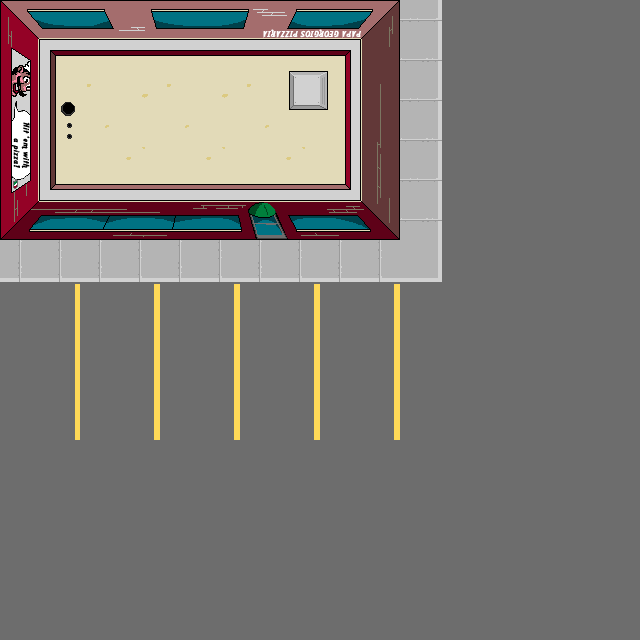
<style>
.page{position:relative;width:640px;height:640px;background:#6d6d6d}
.page>*{position:absolute;margin:0}
.t1{font:8px "AardvarkCafe";letter-spacing:0.1em;color:#ffffff}
.t2{font:8px "AardvarkCafe";letter-spacing:0.1em;color:#000000}
</style>
<div class="page">
<p class="t1" style="left:263px;top:29px;width:98px;height:9px;rotate:180deg">PAPA GEORGIOS PIZZARIA</p>
<p class="t2" style="left:12px;top:122px;width:18px;height:46px;text-align:right;rotate:90deg">Hit ‘em with<br>a pizza!</p>
</div>
